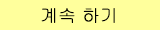
<style>
.page{position:relative;width:160px;height:30px;background:#ffff9c}
.page>*{position:absolute;margin:0}
.t1{font:18px "Gulim";color:#000000}
</style>
<div class="page">
<p class="t1" style="left:41px;top:8px;width:74px;height:15px">계속 하기</p>
</div>
